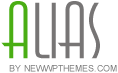
<style>
.page{position:relative;width:118px;height:73px;background:#ffffff}
.page>*{position:absolute;margin:0}
.t1{font:79.4px "AnnaLightCTT";color:#777575;text-transform:uppercase}
.t2{font:79.4px "AnnaLightCTT";color:#4aae14;text-transform:uppercase}
.t3{font:9px "ArialMT";color:#7a7a7a;text-transform:uppercase}
</style>
<div class="page">
<p class="t1" style="left:1px;top:1px;width:99px;height:58px"><span class="t2">A</span>lias</p>
<p class="t3" style="left:9px;top:65px;width:108px;height:7px">by NewWpThemes.com</p>
</div>
